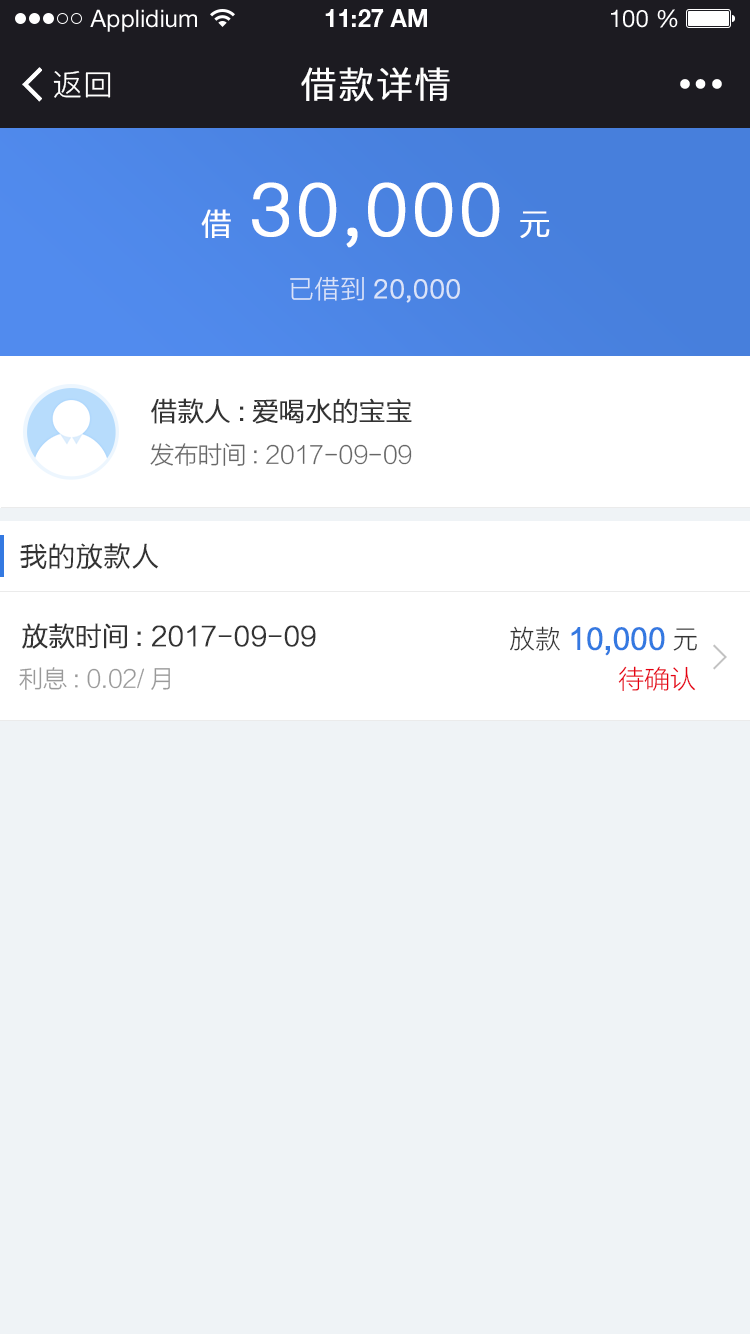
<style>
.page{position:relative;width:750px;height:1334px;background:#eff3f6}
.page>*{position:absolute;margin:0}
.t1{font:24px "HelveticaNeueLTStd-Roman";color:#ffffff}
.t2{font:24px "HelveticaNeueLTStd-Bd";color:#ffffff}
.t3{font:30px "PingFang-SC-Regular";letter-spacing:0.025em;color:#ffffff}
.t4{font:36px "PingFang-SC-Regular";letter-spacing:0.025em;color:#ffffff;font-weight:bold}
.t5{font:72px "PingFang-SC-Regular";letter-spacing:0.025em;color:#ffffff;font-weight:bold}
.t6{font:30px "FZLTXHK--GBK1-0";letter-spacing:0.025em;color:#ffffff;font-weight:bold}
.t7{font:26px "PingFang-SC-Regular";color:#dae3f8;font-weight:bold}
.t8{font:26px "PingFang-SC-Regular";color:#dae3f8}
.t9{font:26px "FZLTXHK--GBK1-0";color:#333333;font-weight:bold}
.t10{font:24px "FZLTXHK--GBK1-0";color:#666666}
.t11{font:28px "FZLTH_YS_GBK";color:#333333}
.t12{font:28px "FZLTH_YS_GB18030";color:#3479e1;font-weight:bold}
.t13{font:26px "PingFang-SC-Regular";color:#333333}
.t14{font:24px "FZLTXHK--GBK1-0";color:#999999}
.t15{font:26px "FZLTXHK--GBK1-0";color:#e60012}
</style>
<div class="page">
<p class="t1" style="left:90px;top:9px;width:107px;height:23px">Applidium</p>
<p class="t2" style="left:325px;top:9px;width:102px;height:18px">11:27 AM</p>
<p class="t1" style="left:611px;top:9px;width:67px;height:19px">100 %</p>
<p class="t3" style="left:53px;top:71px;width:58px;height:27px">返回</p>
<p class="t4" style="left:301px;top:67px;width:149px;height:35px">借款详情</p>
<p class="t5" style="left:252px;top:182px;width:248px;height:66px">30,000</p>
<p class="t6" style="left:201px;top:209px;width:30px;height:29px">借</p>
<p class="t6" style="left:520px;top:211px;width:30px;height:27px">元</p>
<p class="t7" style="left:290px;top:276px;width:170px;height:27px"><span class="t8">已借到</span>20,000</p>
<p class="t9" style="left:151px;top:398px;width:261px;height:26px">借款人:爱喝水的宝宝</p>
<p class="t10" style="left:150px;top:443px;width:262px;height:23px">发布时间: 2017-09-09</p>
<p class="t11" style="left:20px;top:543px;width:139px;height:27px">我的放款人</p>
<p class="t9" style="left:22px;top:623px;width:294px;height:26px">放款时间: 2017-09-09</p>
<p class="t12" style="left:510px;top:626px;width:187px;height:30px"><span class="t13">放款</span>10,000<span class="t13">元</span></p>
<p class="t14" style="left:19px;top:667px;width:151px;height:23px">利息: 0.02/月</p>
<p class="t15" style="left:618px;top:666px;width:78px;height:25px">待确认</p>
</div>
